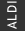
<style>
.page{position:relative;width:25px;height:31px;background:#333333}
.page>*{position:absolute;margin:0}
.t1{font:13px "TrebuchetMS";letter-spacing:0.07em;color:#ffffff}
</style>
<div class="page">
<p class="t1" style="left:7px;top:1px;width:10px;height:28px;rotate:-90deg">ALDI</p>
</div>
